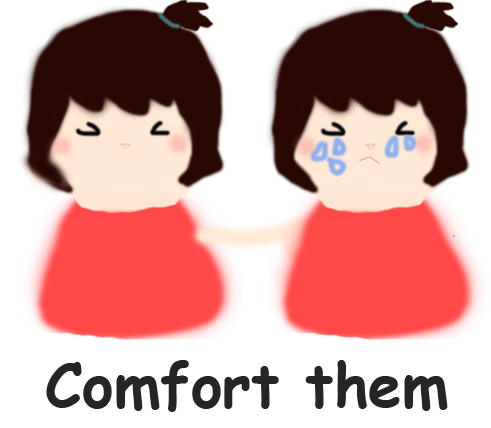
<style>
.page{position:relative;width:491px;height:428px;background:#ffffff}
.page>*{position:absolute;margin:0}
.t1{font:60px "ComicSansMS-Bold";color:#272424}
</style>
<div class="page">
<p class="t1" style="left:46px;top:360px;width:402px;height:52px">Comfort them</p>
</div>
